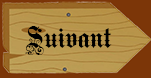
<style>
.page{position:relative;width:151px;height:78px}
.page>*{position:absolute;margin:0}
.t1{font:30px "MediciText";color:#000000}
</style>
<div class="page">
<p class="t1" style="left:25px;top:26px;width:87px;height:29px">Suivant</p>
</div>
